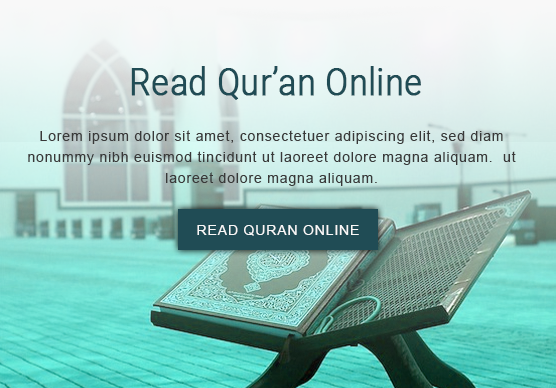
<style>
.page{position:relative;width:556px;height:388px}
.page>*{position:absolute;margin:0}
.t1{font:37.7px "Roboto-Light";color:#204c55;font-weight:bold;scale:0.89 1}
.t2{font:14px/21px "ArialMT";letter-spacing:0.06em;color:#393939}
.t3{font:14px "ArialMT";letter-spacing:0.06em;color:#f8f8f8;text-transform:uppercase}
</style>
<div class="page">
<p class="t1" style="left:131px;top:66px;width:290px;height:34px">Read Qur’an Online</p>
<p class="t2" style="left:28px;top:130px;width:488px;height:56px;text-align:center">Lorem ipsum dolor sit amet, consectetuer adipiscing elit, sed diam nonummy nibh euismod tincidunt ut laoreet dolore magna aliquam.  ut laoreet dolore magna aliquam.</p>
<p class="t3" style="left:197px;top:225px;width:162px;height:11px">Read Quran Online</p>
</div>
